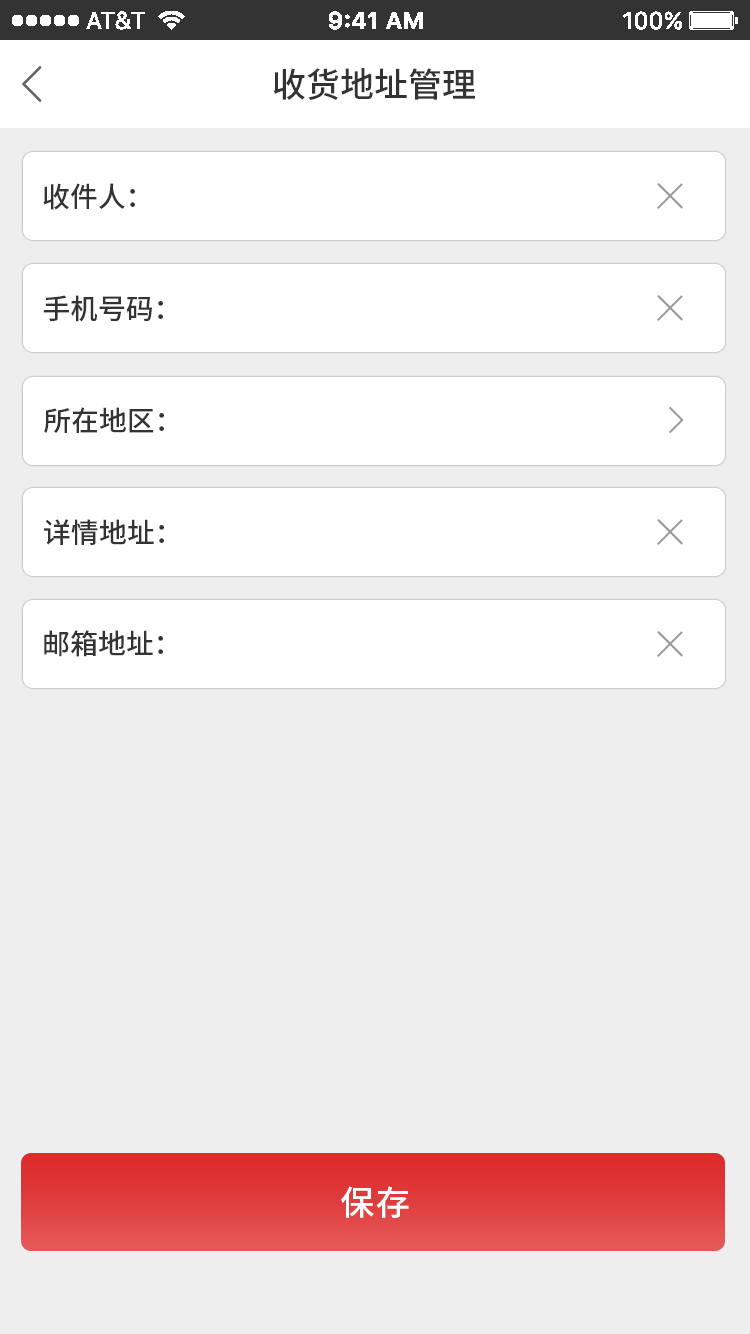
<style>
.page{position:relative;width:750px;height:1334px;background:#eeeeee}
.page>*{position:absolute;margin:0}
.t1{font:34px "SourceHanSansCN-Medium";color:#333333}
.t2{font:28px "SourceHanSansCN-Medium";color:#333333}
.t3{font:34px "SourceHanSansCN-Medium";letter-spacing:0.05em;color:#ffffff}
</style>
<div class="page">
<p class="t1" style="left:273px;top:68px;width:202px;height:32px">收货地址管理</p>
<p class="t2" style="left:43px;top:183px;width:92px;height:27px">收件人：</p>
<p class="t2" style="left:43px;top:295px;width:120px;height:27px">手机号码：</p>
<p class="t2" style="left:44px;top:407px;width:120px;height:27px">所在地区：</p>
<p class="t2" style="left:44px;top:519px;width:120px;height:26px">详情地址：</p>
<p class="t2" style="left:44px;top:630px;width:119px;height:27px">邮箱地址：</p>
<p class="t3" style="left:341px;top:1186px;width:68px;height:32px">保存</p>
</div>
